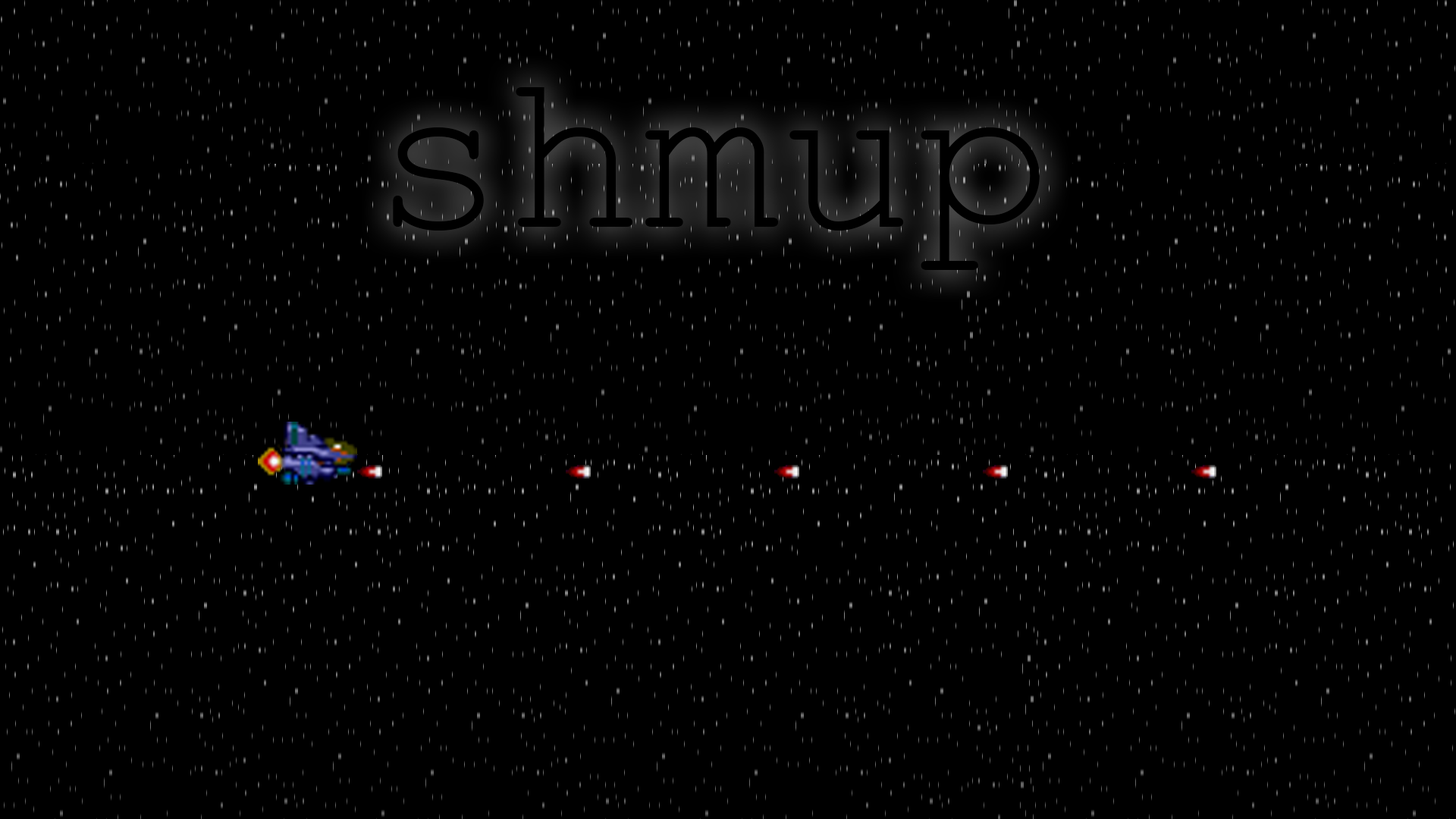
<style>
.page{position:relative;width:1456px;height:819px;background:#000000}
.page>*{position:absolute;margin:0}
.t1{font:227.5px "CourierNewPSMT";color:#000000}
</style>
<div class="page">
<p class="t1" style="left:393px;top:87px;width:647px;height:183px">shmup</p>
</div>
